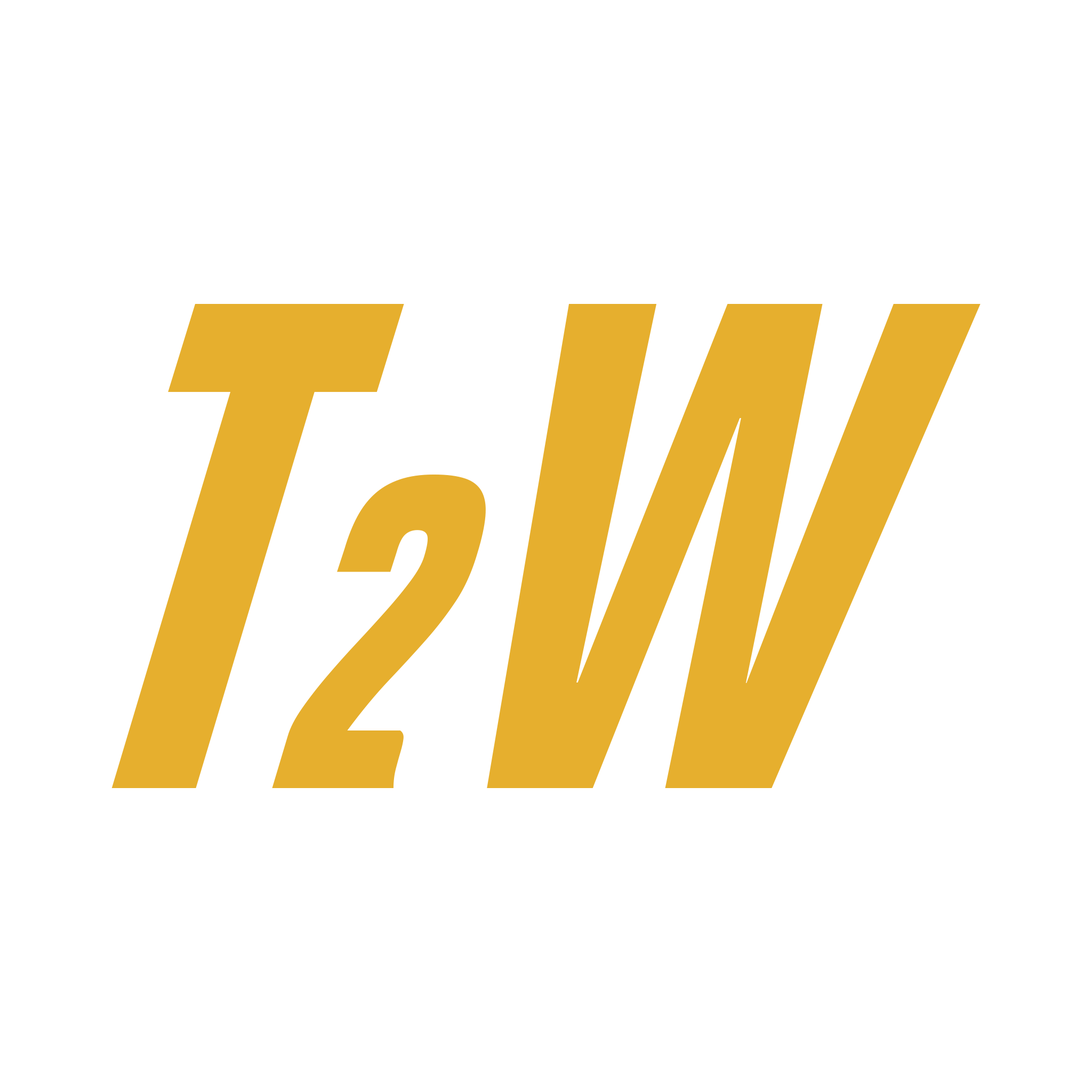
<style>
.page{position:relative;width:1092px;height:1092px;background:#ffffff}
.page>*{position:absolute;margin:0}
.t1{font:677.6px "FightThis";color:#e6af2e}
.t2{font:444.3px "FightThis";color:#e6af2e}
</style>
<div class="page">
<p class="t1" style="left:111px;top:304px;width:870px;height:484px">T<span class="t2">2</span>W</p>
</div>
